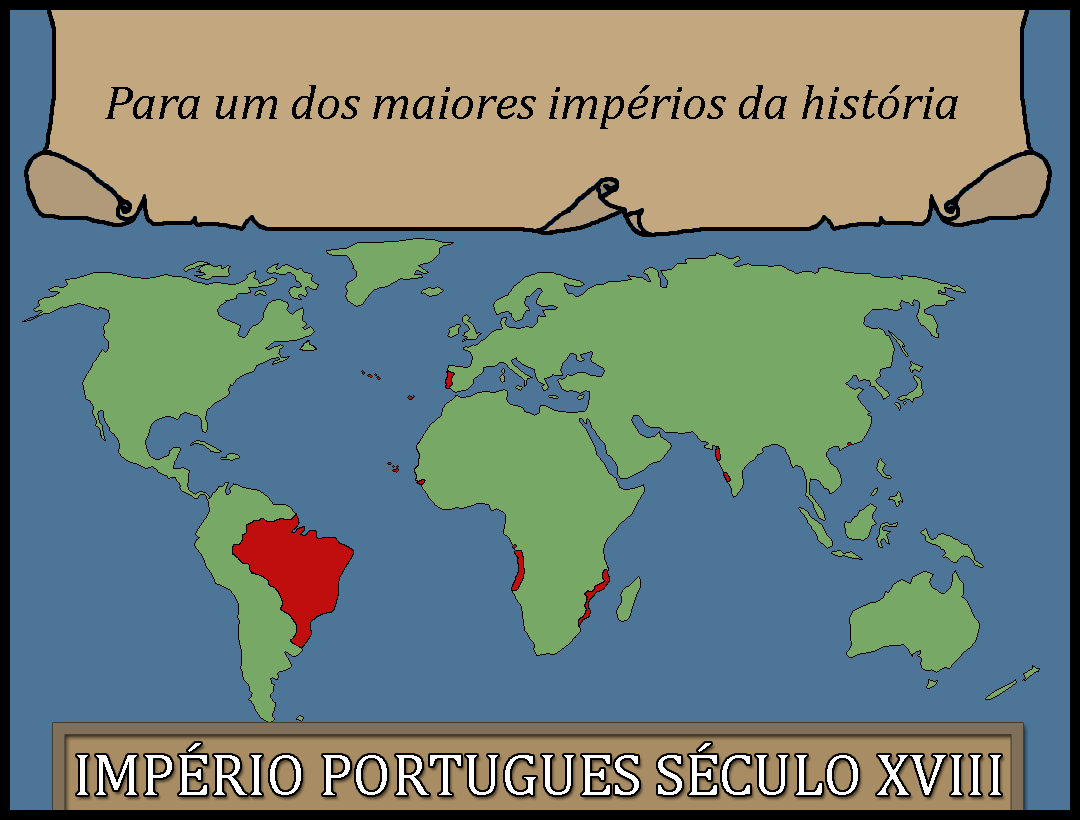
<style>
.page{position:relative;width:1080px;height:820px;background:#4d7597}
.page>*{position:absolute;margin:0}
.t1{font:48px "Cambria-Italic";color:#000000;scale:1.03 1}
.t2{font:60px "Cambria";color:#ffffff}
</style>
<div class="page">
<p class="t1" style="left:105px;top:85px;width:853px;height:44px">Para um dos maiores impérios da história</p>
<p class="t2" style="left:77px;top:743px;width:924px;height:52px">IMPÉRIO PORTUGUES SÉCULO XVIII</p>
</div>
